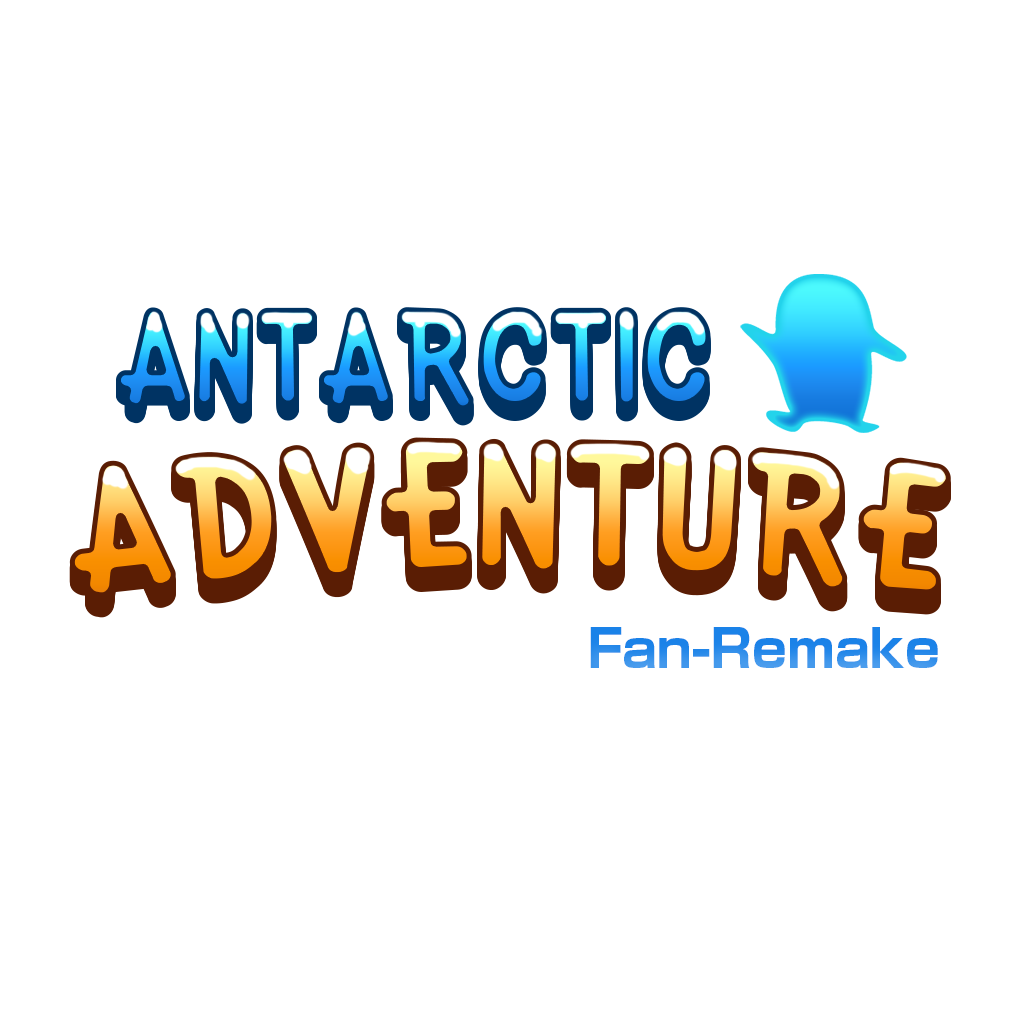
<style>
.page{position:relative;width:1024px;height:1024px;background:#ffffff}
.page>*{position:absolute;margin:0}
.t1{font:125px "KirbyClassic"}
.t2{font:166.7px "KirbyClassic"}
.t3{font:50.9px "ShinGoPro-Bold";color:#2688e9}
</style>
<div class="page">
<p class="t1" style="left:116px;top:307px;width:595px;height:104px">ANTARCTIC</p>
<p class="t2" style="left:69px;top:437px;width:882px;height:161px">ADVENTURE</p>
<p class="t3" style="left:590px;top:627px;width:348px;height:41px">Fan-Remake</p>
</div>
